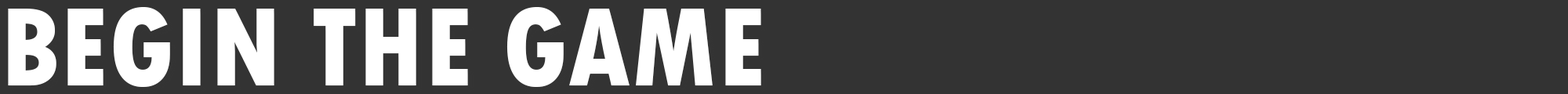
<style>
.page{position:relative;width:1568px;height:94px;background:#333333}
.page>*{position:absolute;margin:0}
.t1{font:117.6px "TwCenMT-CondensedExtraBold";color:#ffffff}
</style>
<div class="page">
<p class="t1" style="left:8px;top:7px;width:753px;height:80px">BEGIN THE GAME</p>
</div>
